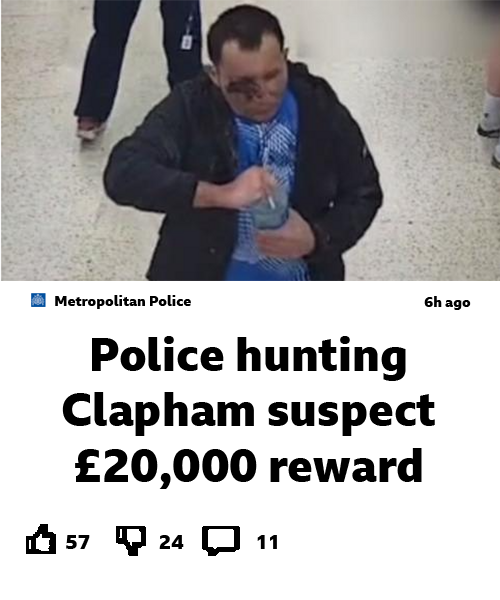
<style>
.page{position:relative;width:500px;height:600px;background:#ffffff}
.page>*{position:absolute;margin:0}
.t1{font:14.3px "BBCReithSans-XBold";color:#000000}
.t2{font:14.3px "BBCReithSans-XBold";color:#010101}
.t3{font:46px "BBCReithSans-XBold";color:#000000}
.t4{font:20px "BBCReithSans-XBold";color:#010101}
.t5{font:20px "BBCReithSans-XBold";color:#000000}
</style>
<div class="page">
<p class="t1" style="left:55px;top:295px;width:136px;height:14px">Metropolitan Police</p>
<p class="t2" style="left:424px;top:296px;width:47px;height:14px">6h ago</p>
<p class="t3" style="left:62px;top:336px;width:373px;height:153px;text-align:center">Police hunting Clapham suspect £20,000 reward</p>
<p class="t4" style="left:66px;top:535px;width:24px;height:14px">57</p>
<p class="t5" style="left:159px;top:535px;width:25px;height:14px">24</p>
<p class="t5" style="left:257px;top:535px;width:20px;height:14px">11</p>
</div>
